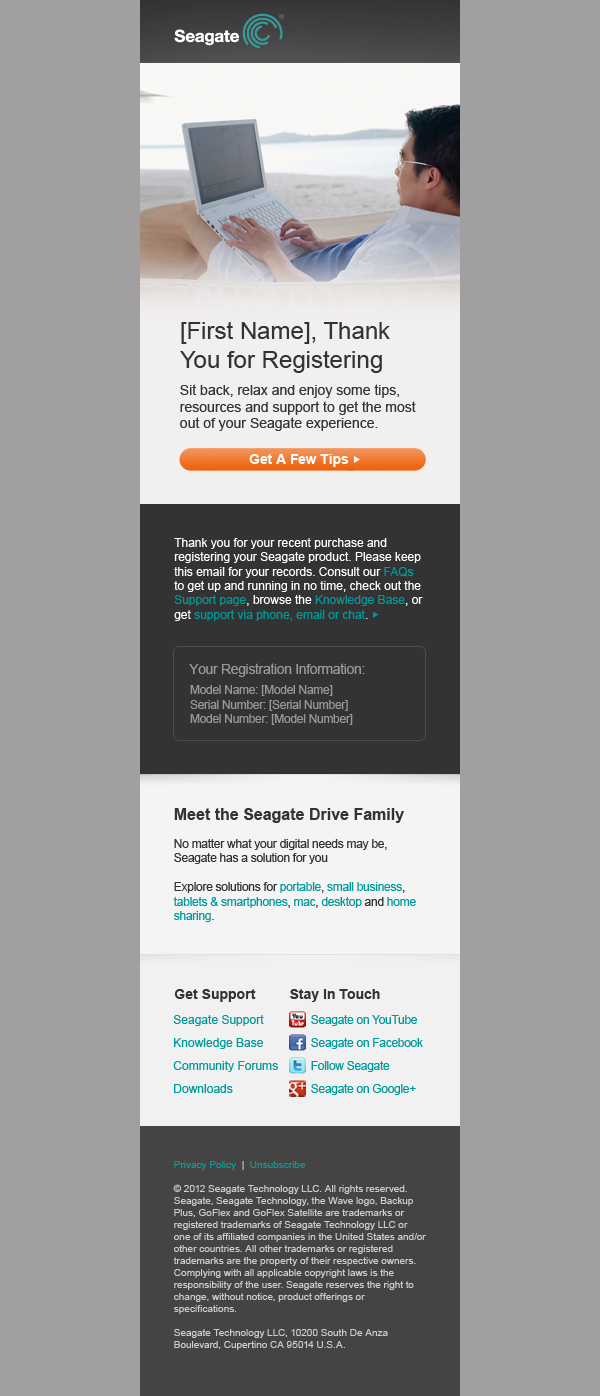
<style>
.page{position:relative;width:600px;height:1396px;background:#a19f9f}
.page>*{position:absolute;margin:0}
.t1{font:24px "ArialMT";color:#333333}
.t2{font:14px "ArialMT";color:#333333}
.t3{font:14px "Arial-BoldMT";letter-spacing:-0.005em;color:#ffffff}
.t4{font:12px "ArialMT";color:#ffffff}
.t5{font:12px "ArialMT";color:#009999}
.t6{font:14px "ArialMT";letter-spacing:-0.024em;color:#999999}
.t7{font:12px "ArialMT";letter-spacing:-0.024em;color:#999999}
.t8{font:16px "Arial-BoldMT";color:#333333}
.t9{font:12px "ArialMT";letter-spacing:-0.023em;color:#333333}
.t10{font:12px "ArialMT";letter-spacing:-0.023em;color:#009999}
.t11{font:14px "Arial-BoldMT";color:#333333}
.t12{font:12px/23px "ArialMT";color:#009999}
.t13{font:12px/23px "ArialMT";letter-spacing:-0.025em;color:#009999}
.t14{font:10px "ArialMT";letter-spacing:-0.005em;color:#cccccc}
.t15{font:10px "ArialMT";color:#109999}
.t16{font:10px "ArialMT";color:#cccccc}
</style>
<div class="page">
<p class="t1" style="left:180px;top:321px;width:210px;height:52px">[First Name], Thank You for Registering</p>
<p class="t2" style="left:180px;top:384px;width:236px;height:47px">Sit back, relax and enjoy some tips, resources and support to get the most out of your Seagate experience.</p>
<p class="t3" style="left:249px;top:454px;width:100px;height:13px">Get A Few Tips</p>
<p class="t4" style="left:174px;top:538px;width:249px;height:83px">Thank you for your recent purchase and registering your Seagate product. Please keep this email for your records. Consult our <span class="t5">FAQs</span> to get up and running in no time, check out the <span class="t5">Support page</span>, browse the <span class="t5">Knowledge Base</span>, or get <span class="t5">support via phone, email or chat</span>.</p>
<p class="t6" style="left:189px;top:663px;width:176px;height:14px">Your Registration Information:</p>
<p class="t7" style="left:190px;top:685px;width:163px;height:40px">Model Name: [Model Name]<br>Serial Number: [Serial Number]<br>Model Number: [Model Number]</p>
<p class="t8" style="left:174px;top:808px;width:230px;height:15px">Meet the Seagate Drive Family</p>
<p class="t9" style="left:173px;top:839px;width:243px;height:83px">No matter what your digital needs may be, Seagate has a solution for you<br><br>Explore solutions for <span class="t10">portable</span>, <span class="t10">small business</span>, <span class="t10">tablets &amp; smartphones</span>, <span class="t10">mac</span>, <span class="t10">desktop</span> and <span class="t10">home sharing</span>.</p>
<p class="t11" style="left:174px;top:989px;width:82px;height:13px">Get Support</p>
<p class="t11" style="left:290px;top:989px;width:90px;height:13px">Stay In Touch</p>
<p class="t12" style="left:173px;top:1015px;width:105px;height:78px">Seagate Support<br>Knowledge Base<br>Community Forums<br>Downloads</p>
<p class="t13" style="left:311px;top:1015px;width:112px;height:80px">Seagate on YouTube<br>Seagate on Facebook<br>Follow Seagate<br>Seagate on Google+</p>
<p class="t14" style="left:173px;top:1161px;width:253px;height:189px"><span class="t15">Privacy Policy</span><span class="t16">  |  </span><span class="t15">Unsubscribe<br><br></span>© 2012 Seagate Technology LLC. All rights reserved. Seagate, Seagate Technology, the Wave logo, Backup Plus, GoFlex and GoFlex Satellite are trademarks or registered trademarks of Seagate Technology LLC or one of its affiliated companies in the United States and/or other countries. All other trademarks or registered trademarks are the property of their respective owners. Complying with all applicable copyright laws is the responsibility of the user. Seagate reserves the right to change, without notice, product offerings or specifications. <br><br>Seagate Technology LLC, 10200 South De Anza Boulevard, Cupertino CA 95014 U.S.A.</p>
</div>
